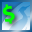
<style>
.page{position:relative;width:32px;height:32px}
.page>*{position:absolute;margin:0}
.t1{font:24px "MyriadPro-Bold";color:#00ff00}
</style>
<div class="page">
<p class="t1" style="left:2px;top:4px;width:13px;height:20px;rotate:-13deg">$</p>
</div>
